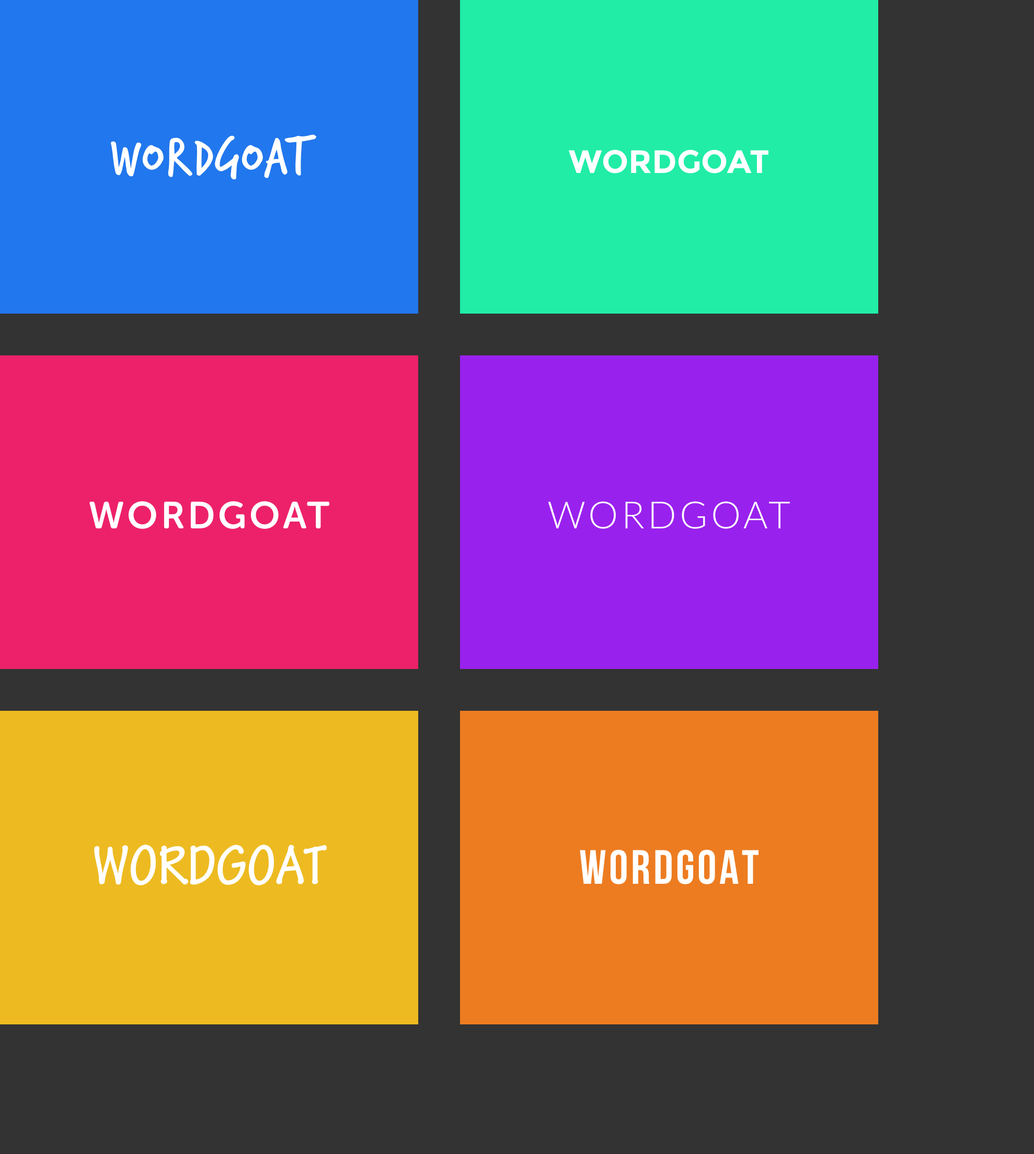
<style>
.page{position:relative;width:1034px;height:1154px;background:#333333}
.page>*{position:absolute;margin:0}
.t1{font:58.5px "Verveine-Regular";color:#ffffff;text-transform:uppercase}
.t2{font:32.4px "Montserrat-Bold";color:#ffffff;text-transform:uppercase}
.t3{font:37.6px "MuseoSansRounded-700";letter-spacing:0.08em;color:#ffffff;text-transform:uppercase}
.t4{font:37.6px "Lato-Light";letter-spacing:0.08em;color:#ffffff;text-transform:uppercase}
.t5{font:58.5px "TektonPro-BoldCond";color:#ffffff;text-transform:uppercase}
.t6{font:48.1px "BebasNeueBold";letter-spacing:0.06em;color:#ffffff;text-transform:uppercase}
</style>
<div class="page">
<p class="t1" style="left:111px;top:134px;width:205px;height:46px">Wordgoat</p>
<p class="t2" style="left:568px;top:149px;width:200px;height:24px">Wordgoat</p>
<p class="t3" style="left:89px;top:501px;width:241px;height:28px">Wordgoat</p>
<p class="t4" style="left:548px;top:501px;width:242px;height:28px">Wordgoat</p>
<p class="t5" style="left:94px;top:844px;width:233px;height:41px">Wordgoat</p>
<p class="t6" style="left:579px;top:849px;width:179px;height:35px">Wordgoat</p>
</div>
